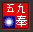
<style>
.page{position:relative;width:33px;height:32px;background:#f20000}
.page>*{position:absolute;margin:0}
.t1{font:10.4px "SimSun";color:#ffffff}
.t2{font:11.7px "SimSun";color:#ffffff}
</style>
<div class="page">
<p class="t1" style="left:7px;top:4px;width:18px;height:9px">五九</p>
<p class="t2" style="left:16px;top:15px;width:11px;height:12px">奉</p>
</div>
